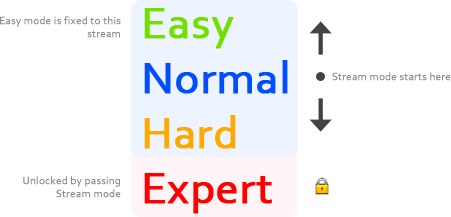
<style>
.page{position:relative;width:451px;height:217px;background:#ffffff}
.page>*{position:absolute;margin:0}
.t1{font:11px "Corbel";color:#909090;font-weight:bold}
.t2{font:45.8px "Corbel";color:#004eff;font-weight:bold}
.t3{font:45.8px "Corbel";color:#73df00;font-weight:bold}
.t4{font:45.8px "Corbel";color:#ffa800;font-weight:bold}
.t5{font:45.8px "Corbel";color:#ff0000;font-weight:bold}
</style>
<div class="page">
<p class="t1" style="left:0px;top:16px;width:121px;height:22px;text-align:right">Easy mode is fixed to this stream</p>
<p class="t2" style="left:144px;top:8px;width:144px;height:206px"><span class="t3">Easy<br></span>Normal<br><span class="t4">Hard<br></span><span class="t5">Expert</span></p>
<p class="t1" style="left:332px;top:72px;width:119px;height:9px">Stream mode starts here</p>
<p class="t1" style="left:23px;top:176px;width:98px;height:22px;text-align:right">Unlocked by passing Stream mode</p>
</div>
